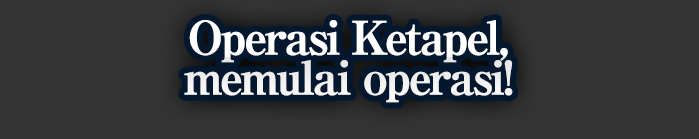
<style>
.page{position:relative;width:699px;height:139px;background:#333333}
.page>*{position:absolute;margin:0}
.t1{font:46px/40px "RyuminPro-ExBold";letter-spacing:-0.08em;color:#ffffff;font-weight:bold}
</style>
<div class="page">
<p class="t1" style="left:184px;top:20px;width:329px;height:83px;text-align:center">Operasi Ketapel,<br>memulai operasi!</p>
</div>
